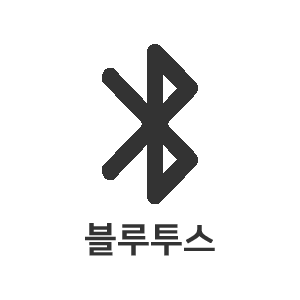
<style>
.page{position:relative;width:300px;height:300px;background:#ffffff}
.page>*{position:absolute;margin:0}
.t1{font:35px "NanumSquareB";color:#333333;font-weight:bold}
</style>
<div class="page">
<p class="t1" style="left:85px;top:223px;width:130px;height:33px">블루투스</p>
</div>
